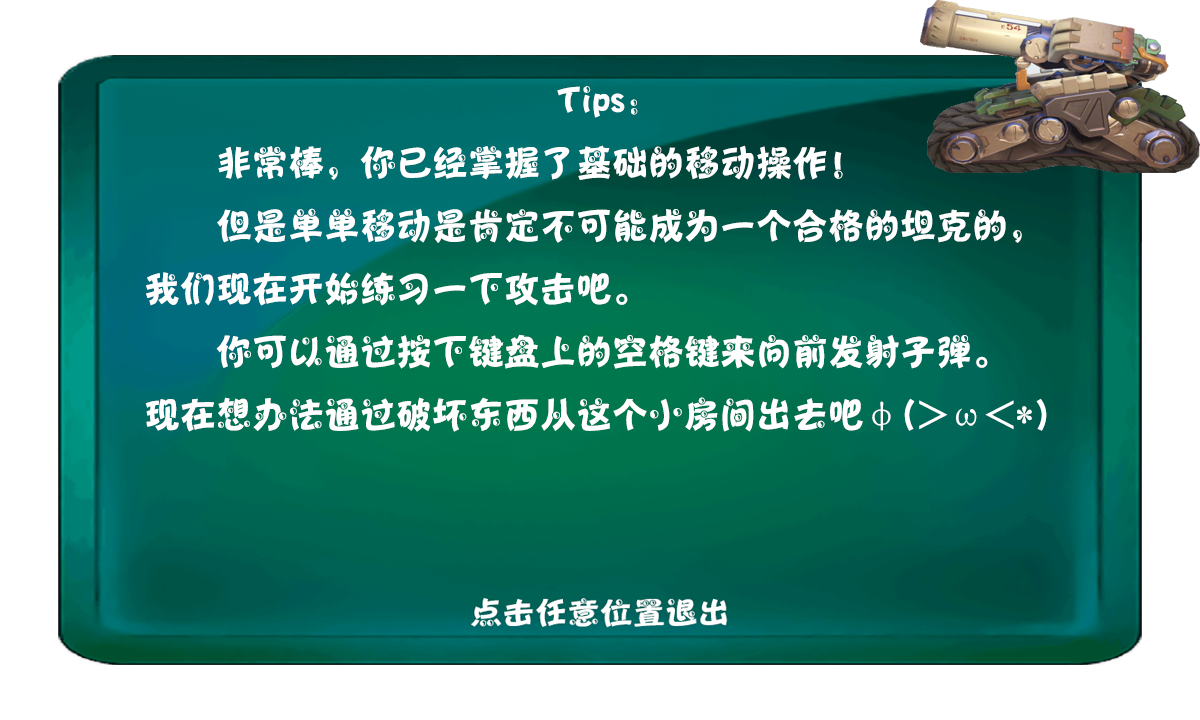
<style>
.page{position:relative;width:1200px;height:720px;background:#ffffff}
.page>*{position:absolute;margin:0}
.t1{font:36px "Jtaiji";color:#ffffff}
</style>
<div class="page">
<p class="t1" style="left:145px;top:86px;width:902px;height:346px;text-align:center">Tips:<br>      非常棒，你已经掌握了基础的移动操作！<br>      但是单单移动是肯定不可能成为一个合格的坦克的，<br>    我们现在开始练习一下攻击吧。<br>      你可以通过按下键盘上的空格键来向前发射子弹。<br>    现在想办法通过破坏东西从这个小房间出去吧φ(&gt;ω&lt;*)</p>
</div>
